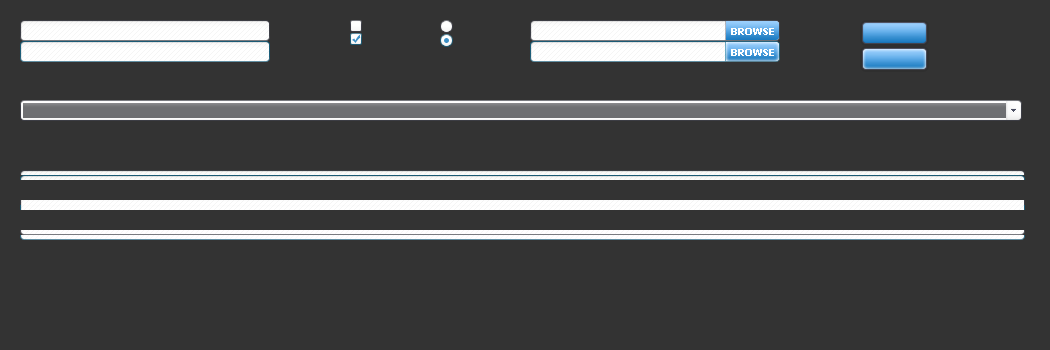
<style>
.page{position:relative;width:1050px;height:350px;background:#333333}
.page>*{position:absolute;margin:0}
.t1{font:10px "Tahoma-Bold";color:#ffffff;text-transform:uppercase}
</style>
<div class="page">
<p class="t1" style="left:731px;top:28px;width:43px;height:7px">browse</p>
<p class="t1" style="left:731px;top:49px;width:43px;height:7px">browse</p>
</div>
